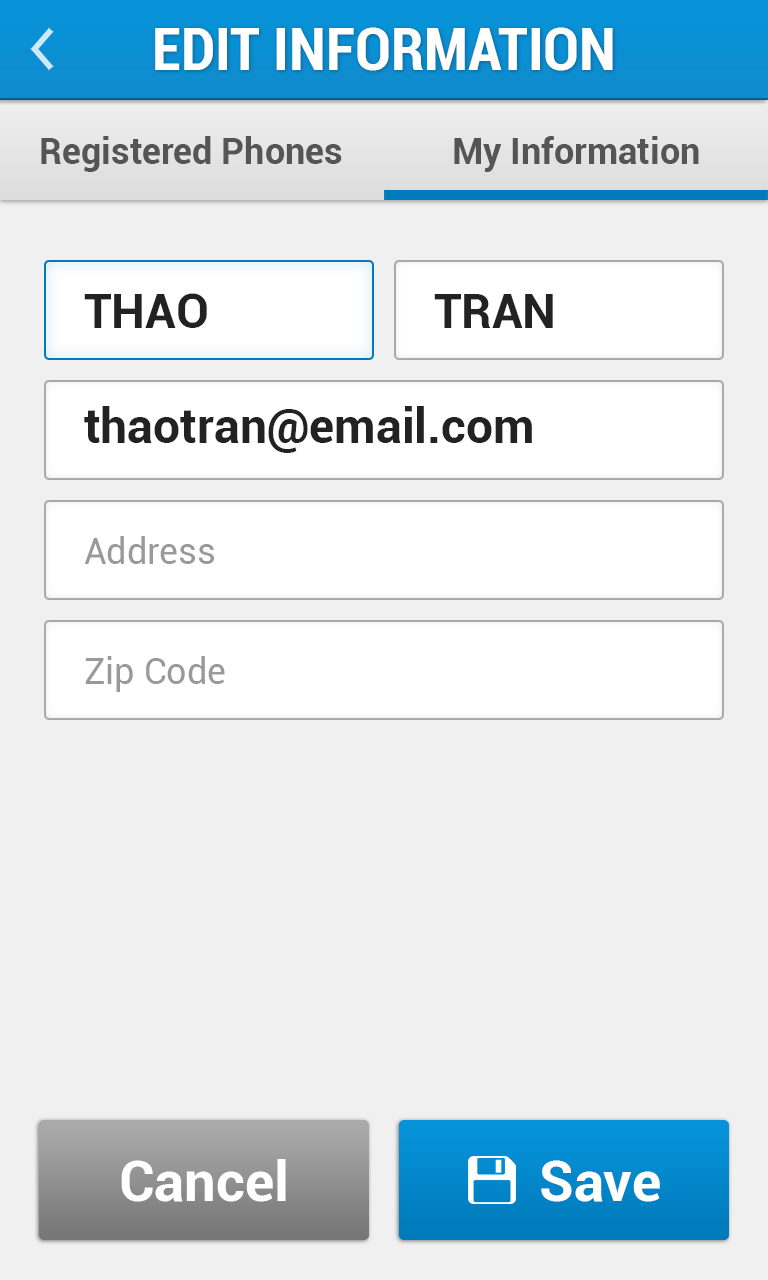
<style>
.page{position:relative;width:768px;height:1280px;background:#f0f0f0}
.page>*{position:absolute;margin:0}
.t1{font:60px "Roboto-BoldCondensed";color:#ffffff}
.t2{font:36px "Roboto-Bold";color:#555555}
.t3{font:48px "Roboto-Bold";color:#222222}
.t4{font:36px "Roboto-Regular";color:#999999}
.t5{font:56px "Roboto-Bold";color:#ffffff}
</style>
<div class="page">
<p class="t1" style="left:155px;top:27px;width:458px;height:44px">EDIT INFORMATION</p>
<p class="t2" style="left:41px;top:136px;width:301px;height:36px">Registered Phones</p>
<p class="t2" style="left:454px;top:136px;width:245px;height:36px">My Information</p>
<p class="t3" style="left:84px;top:293px;width:123px;height:35px">THAO</p>
<p class="t3" style="left:434px;top:294px;width:119px;height:34px">TRAN</p>
<p class="t3" style="left:84px;top:406px;width:448px;height:47px">thaotran@email.com</p>
<p class="t4" style="left:84px;top:536px;width:130px;height:28px">Address</p>
<p class="t4" style="left:85px;top:656px;width:140px;height:36px">Zip Code</p>
<p class="t5" style="left:121px;top:1159px;width:165px;height:43px">Cancel</p>
<p class="t5" style="left:541px;top:1160px;width:119px;height:42px">Save</p>
</div>
